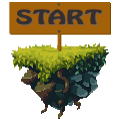
<style>
.page{position:relative;width:119px;height:119px;background:#ffffff}
.page>*{position:absolute;margin:0}
.t1{font:17.5px "HoboStd";color:#362f2d;font-weight:bold;scale:1.47 1}
</style>
<div class="page">
<p class="t1" style="left:16px;top:9px;width:86px;height:16px">START</p>
<p class="t1" style="left:17px;top:10px;width:86px;height:16px">START</p>
</div>
